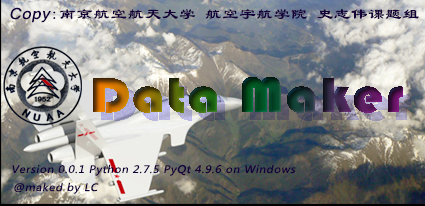
<style>
.page{position:relative;width:425px;height:206px}
.page>*{position:absolute;margin:0}
.t1{font:15.2px "LiSu";letter-spacing:0.05em;color:#140138;scale:1.07 1}
.t2{font:15.2px "MicrosoftSansSerif";letter-spacing:0.05em;color:#140138;font-style:italic;scale:1.07 1}
.t3{font:10.2px "MicrosoftYaHei";letter-spacing:0.05em;color:#140138;font-style:italic;scale:1.07 1}
</style>
<div class="page">
<p class="t1" style="left:10px;top:7px;width:409px;height:16px"><span class="t2">Copy</span>:南京航空航天大学 航空宇航学院 史志伟课题组</p>
<p class="t3" style="left:12px;top:164px;width:284px;height:12px">Version 0.0.1 Python 2.7.5 PyQt 4.9.6 on Windows</p>
<p class="t3" style="left:14px;top:182px;width:85px;height:12px">@maked by LC</p>
</div>
